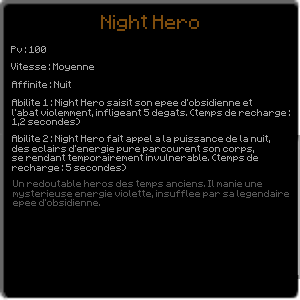
<style>
.page{position:relative;width:300px;height:300px;background:#000000}
.page>*{position:absolute;margin:0}
.t1{font:16px "Minecraft";color:#7f4d0d}
.t2{font:8px "Minecraft";color:#a4a4a4}
.t3{font:8px "Minecraft";color:#575757}
</style>
<div class="page">
<p class="t1" style="left:101px;top:15px;width:98px;height:16px">Night Hero</p>
<p class="t2" style="left:11px;top:46px;width:35px;height:7px">Pv : 100</p>
<p class="t2" style="left:11px;top:63px;width:83px;height:8px">Vitesse : Moyenne</p>
<p class="t2" style="left:12px;top:81px;width:59px;height:7px">Affinite : Nuit</p>
<p class="t2" style="left:12px;top:99px;width:278px;height:27px">Abilite 1 : Night Hero saisit son epee d'obsidienne et <br>l'abat violemment, infligeant 5 degats. (temps de recharge :<br>1,2 secondes)</p>
<p class="t2" style="left:12px;top:135px;width:258px;height:37px">Abilite 2 : Night Hero fait appel a la puissance de la nuit,<br>des eclairs d'energie pure parcourent son corps,<br>se rendant temporairement invulnerable. (temps de<br>recharge : 5 secondes)</p>
<p class="t3" style="left:13px;top:180px;width:276px;height:27px">Un redoutable heros des temps anciens. Il manie une <br>mysterieuse energie violette, insufflee par sa legendaire<br>epee d'obsidienne.</p>
</div>
